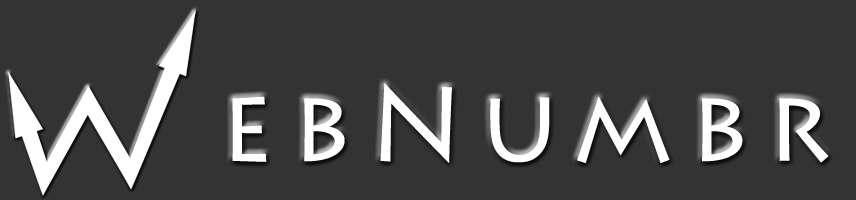
<style>
.page{position:relative;width:856px;height:200px;background:#333333}
.page>*{position:absolute;margin:0}
.t1{font:104.7px "LithosPro-Regular";letter-spacing:0.16em;color:#ffffff}
</style>
<div class="page">
<p class="t1" style="left:232px;top:83px;width:597px;height:80px">ebNumbr</p>
</div>
